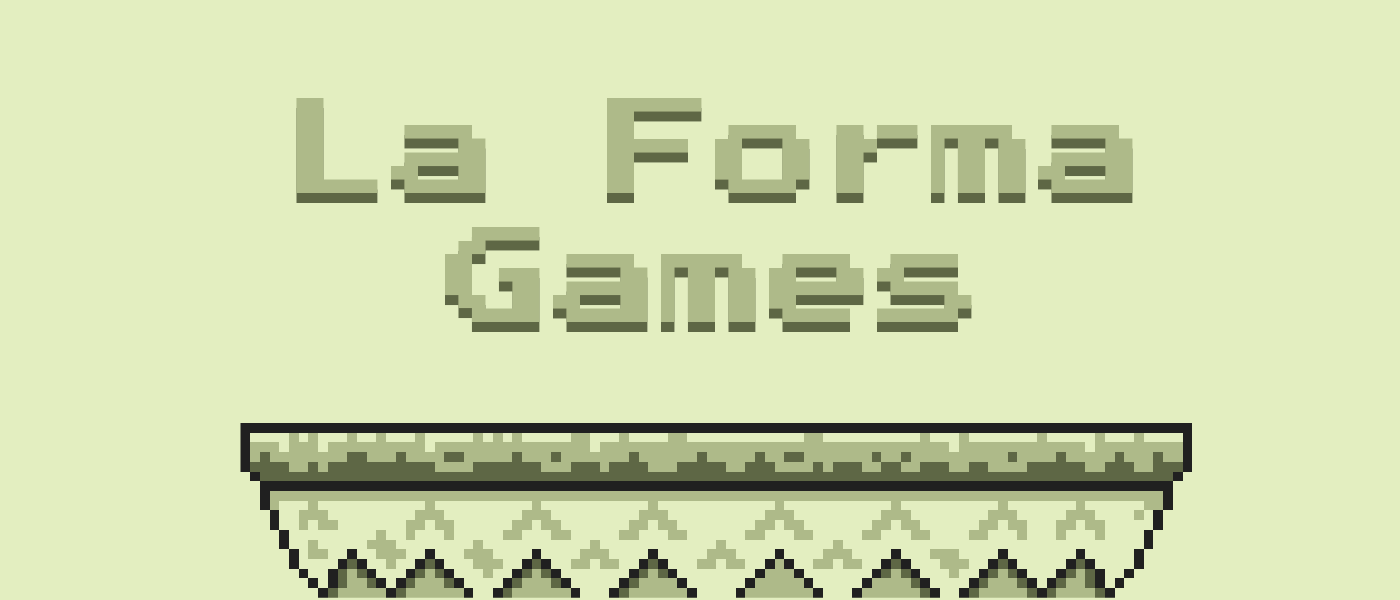
<style>
.page{position:relative;width:1400px;height:600px;background:#e3eec0}
.page>*{position:absolute;margin:0}
.t1{font:107.9px "PressStart2P-Regular";color:#aeba89}
.t2{font:107.9px "PressStart2P-Regular"}
</style>
<div class="page">
<p class="t1" style="left:296px;top:98px;width:837px;height:224px;text-align:center">La Forma<br>Games</p>
<p class="t2" style="left:296px;top:108px;width:837px;height:224px;text-align:center">La Forma<br>Games</p>
</div>
